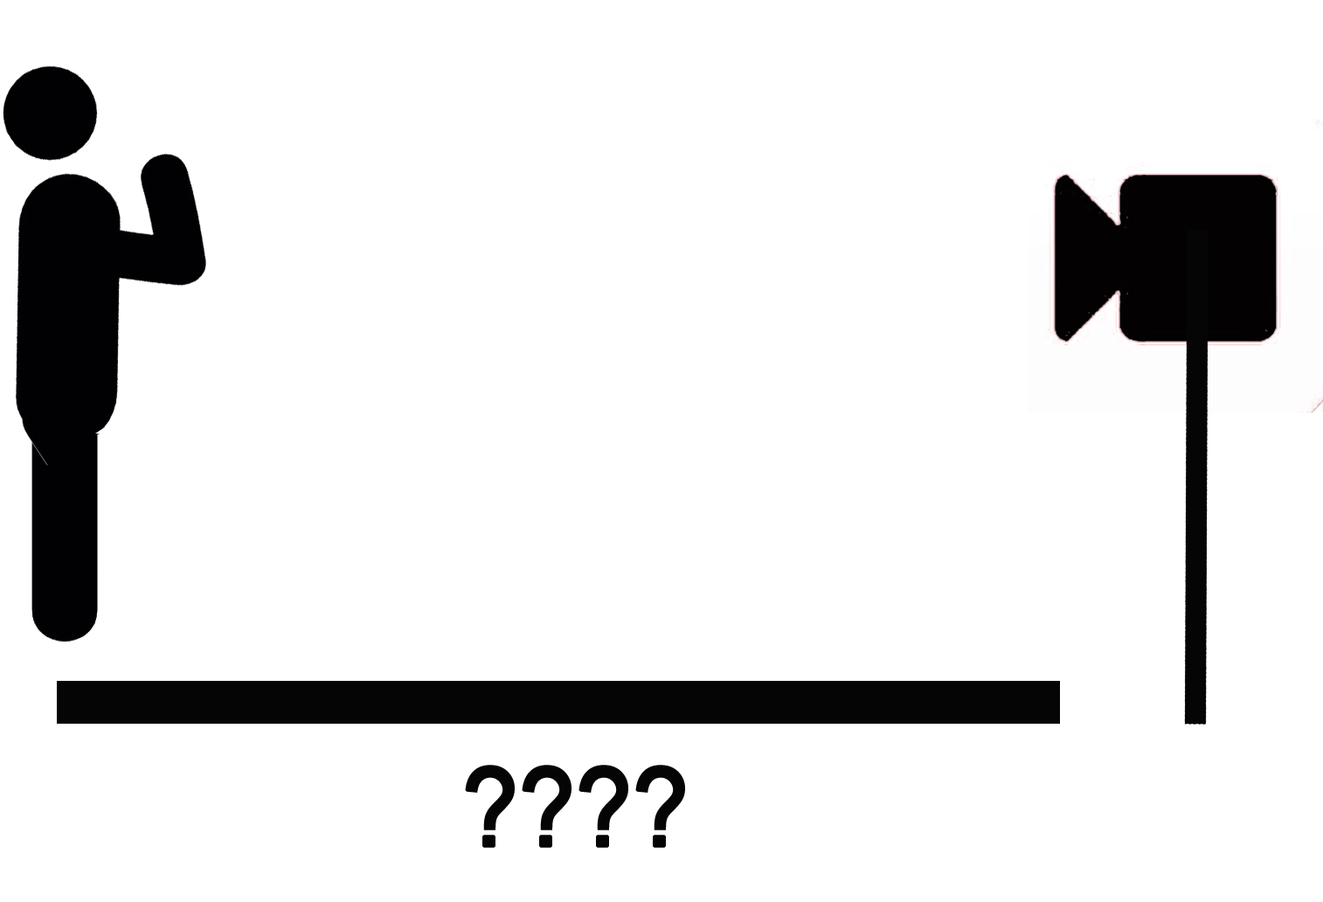
<style>
.page{position:relative;width:1323px;height:902px;background:#ffffff}
.page>*{position:absolute;margin:0}
.t1{font:109.2px "ArialMT";letter-spacing:-0.017em;color:#050505;font-weight:bold;scale:0.92 1}
</style>
<div class="page">
<p class="t1" style="left:465px;top:764px;width:220px;height:83px">????</p>
</div>
